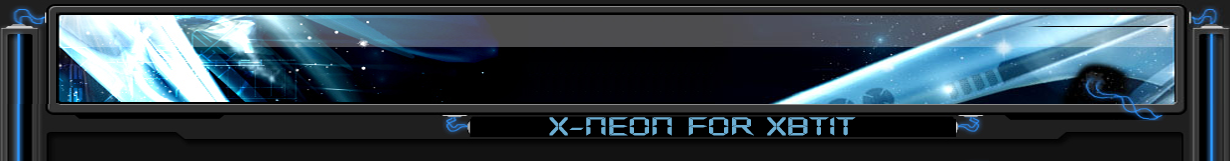
<style>
.page{position:relative;width:1230px;height:161px}
.page>*{position:absolute;margin:0}
.t1{font:25px "DigifaceWide";color:#6caed3;scale:1.23 1}
</style>
<div class="page">
<p class="t1" style="left:549px;top:117px;width:307px;height:19px">X-NEON for xbtit</p>
</div>
